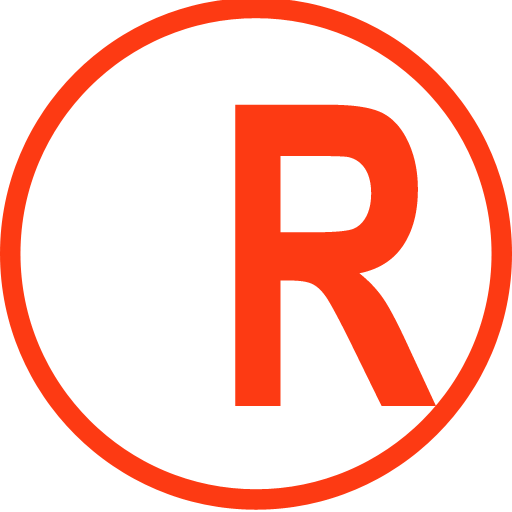
<style>
.page{position:relative;width:512px;height:512px;background:#ffffff}
.page>*{position:absolute;margin:0}
.t1{font:420.2px "Arial-BoldMT";color:#fd3a13;scale:0.75 1}
</style>
<div class="page">
<p class="t1" style="left:235px;top:104px;width:201px;height:302px">R</p>
</div>
